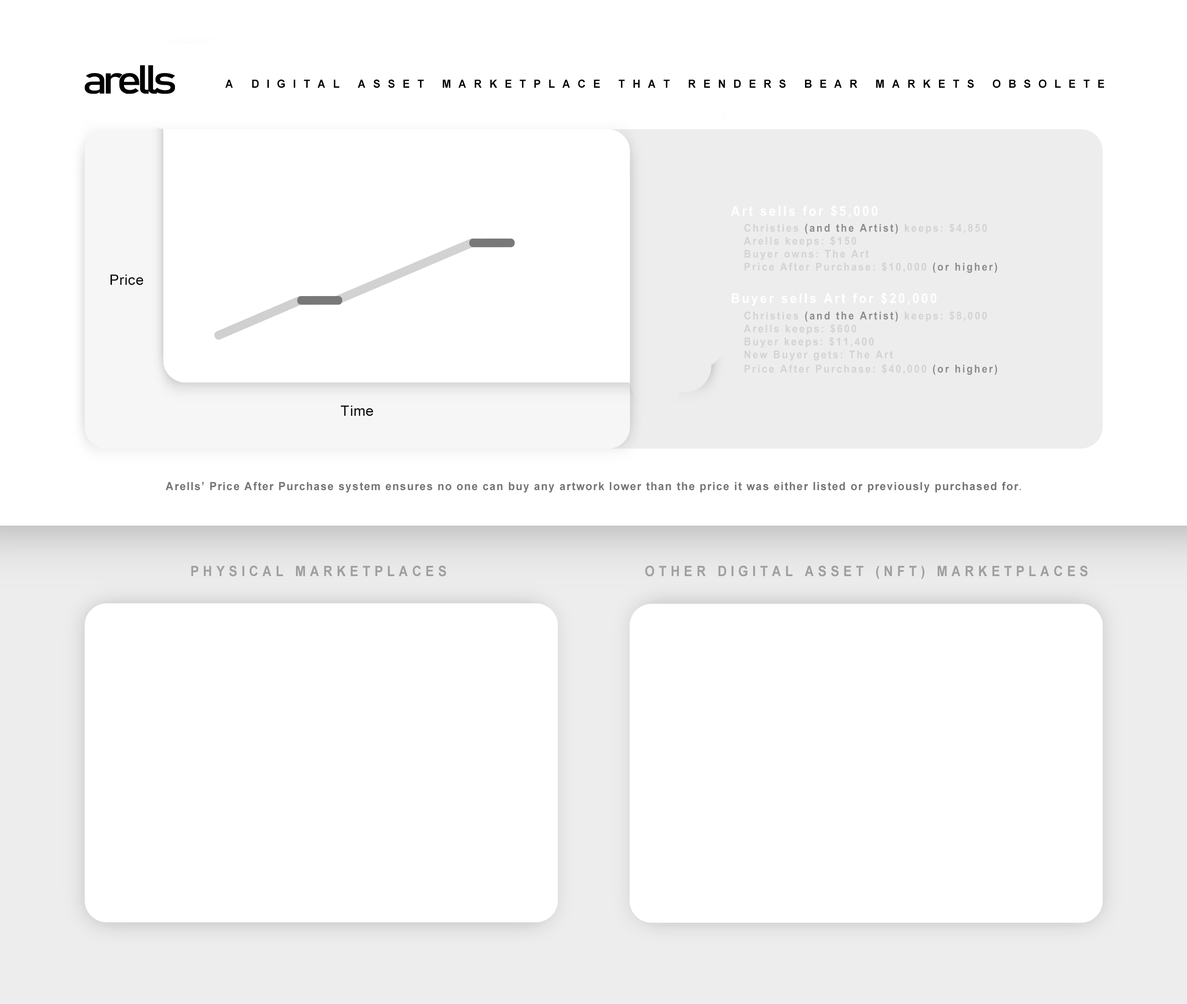
<style>
.page{position:relative;width:1187px;height:1004px;background:#ffffff}
.page>*{position:absolute;margin:0}
.t1{font:11.3px "Arial-BoldMT";letter-spacing:0.68em;color:#000000}
.t2{font:10.8px "Arial-BoldMT";letter-spacing:0.16em;color:#d3d3d3;scale:0.91 1}
.t3{font:11.9px "ArialMT";letter-spacing:0.16em;color:#ffffff;scale:0.91 1}
.t4{font:13.5px "Arial-BoldMT";letter-spacing:0.16em;color:#ffffff;scale:0.91 1}
.t5{font:2.7px "Arial-BoldMT";letter-spacing:0.16em;color:#d3d3d3;scale:0.91 1}
.t6{font:10.8px "Arial-BoldMT";letter-spacing:0.16em;color:#8c8c8c;scale:0.91 1}
.t7{font:2.7px "Arial-BoldMT";letter-spacing:0.16em;color:#d2d2d2;scale:0.91 1}
.t8{font:10.8px "Arial-BoldMT";letter-spacing:0.16em;color:#d2d2d2;scale:0.91 1}
.t9{font:14.4px "ArialMT";letter-spacing:0.02em;color:#000000}
.t10{font:11.3px "Arial-BoldMT";letter-spacing:0.08em;color:#737373}
.t11{font:11.3px "MyriadPro-Regular";letter-spacing:0.08em;color:#737373}
.t12{font:14.4px "Arial-BoldMT";letter-spacing:0.32em;color:#9f9f9f;scale:0.89 1}
</style>
<div class="page">
<p class="t1" style="left:225px;top:80px;width:879px;height:8px">A DIGITAL ASSET MARKETPLACE THAT RENDERS BEAR MARKETS OBSOLETE</p>
<p class="t2" style="left:731px;top:205px;width:267px;height:170px"><span class="t3"><br></span><span class="t4">Art sells for $5,000<br></span><span class="t5"> <br></span>   Christies <span class="t6">(and the Artist)</span> keeps: $4,850<br>   Arells keeps: $150<br>   Buyer owns: The Art<br>   Price After Purchase: $10,000 <span class="t6">(or higher)<br></span><span class="t4"><br>Buyer sells Art for $20,000<br></span><span class="t7"> <br></span><span class="t8">   Christies </span><span class="t6">(and the Artist)</span> keeps: $8,000<br>   Arells keeps: $600<br>   Buyer keeps: $11,400<br>   New Buyer gets: The Art<br>   Price After Purchase: $40,000 <span class="t6">(or higher)</span></p>
<p class="t9" style="left:110px;top:274px;width:34px;height:11px">Price</p>
<p class="t9" style="left:341px;top:405px;width:32px;height:11px">Time</p>
<p class="t10" style="left:166px;top:482px;width:855px;height:11px">Arells’ Price After Purchase system ensures no one can buy any artwork lower than the price it was either listed or previously purchased for<span class="t11">.</span></p>
<p class="t12" style="left:191px;top:565px;width:256px;height:12px">PHYSICAL MARKETPLACES</p>
<p class="t12" style="left:645px;top:565px;width:443px;height:14px">OTHER DIGITAL ASSET (NFT) MARKETPLACES</p>
</div>
